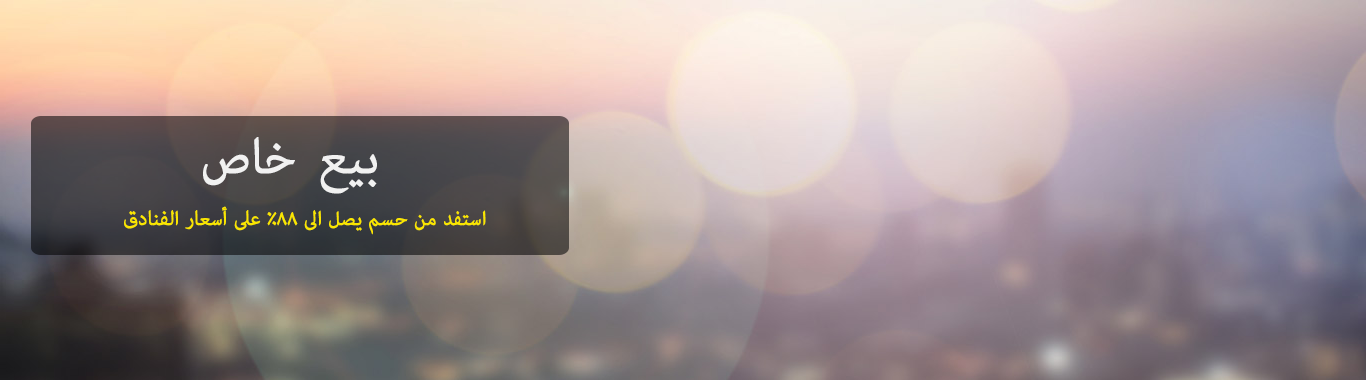
<style>
.page{position:relative;width:1366px;height:380px}
.page>*{position:absolute;margin:0}
.t1{font:70px "AdobeArabic-Regular";color:#f1f1f1;font-weight:bold}
.t2{font:28px "AdobeArabic-Regular";color:#fae600;font-weight:bold}
</style>
<div class="page">
<p class="t1" style="left:203px;top:137px;width:174px;height:57px">بيع خاص</p>
<p class="t2" style="left:124px;top:206px;width:362px;height:29px">استفد من حسم يصل الى 88% على أسعار الفنادق</p>
</div>
